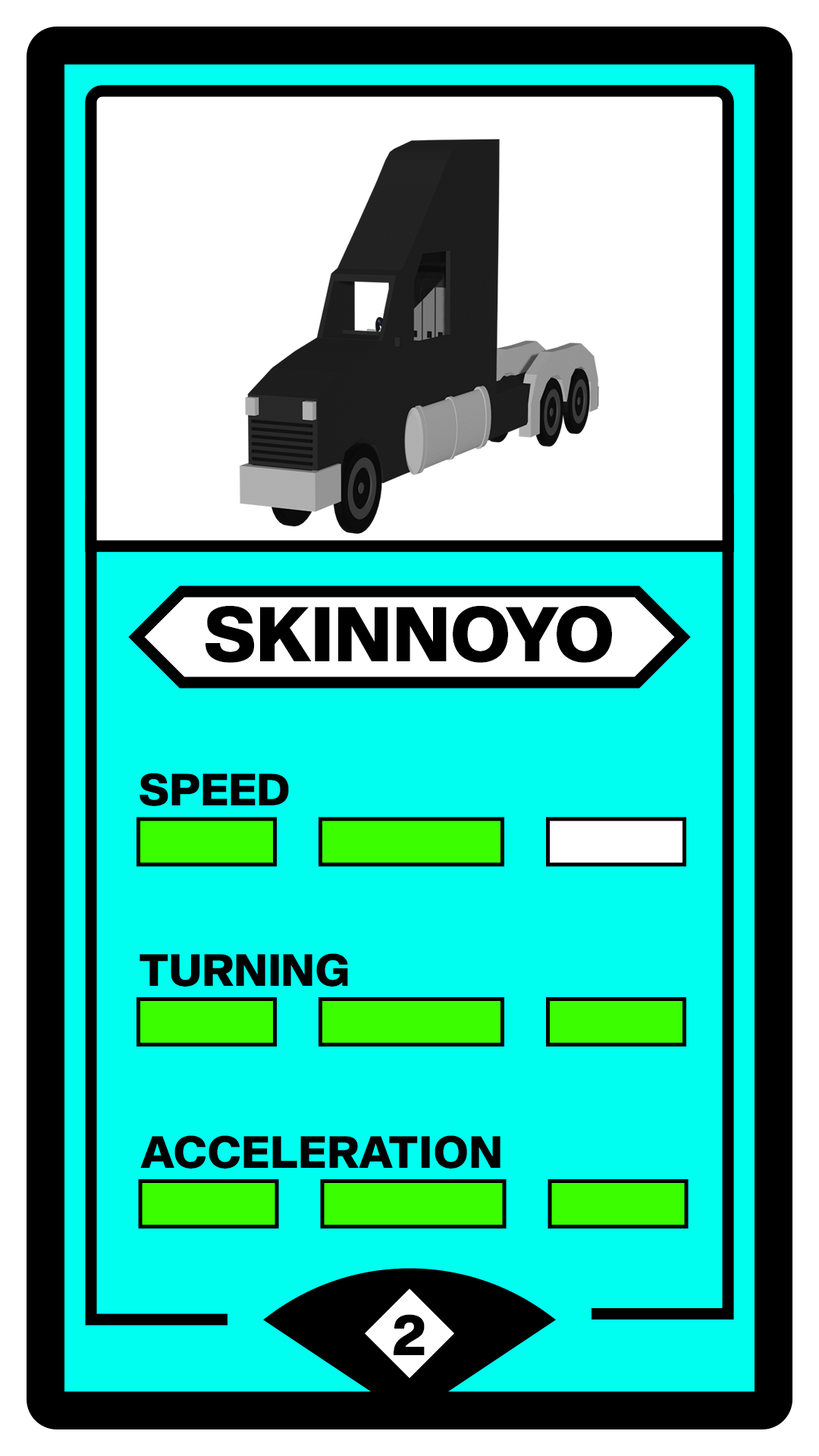
<style>
.page{position:relative;width:819px;height:1456px;background:#00fff0}
.page>*{position:absolute;margin:0}
.t1{font:75.8px "Shapiro-85SuperHeavy";letter-spacing:-0.01em;color:#000000}
.t2{font:44.2px "Shapiro-85SuperHeavy";letter-spacing:-0.01em;color:#000000}
.t3{font:44.2px "Shapiro-85SuperHeavy";letter-spacing:-0.01em;color:#000000;text-transform:uppercase}
.t4{font:56.9px "Shapiro-85SuperHeavy";letter-spacing:-0.01em;color:#000000}
</style>
<div class="page">
<p class="t1" style="left:206px;top:606px;width:406px;height:57px">SKINNOYO</p>
<p class="t2" style="left:140px;top:773px;width:149px;height:33px">SPEED</p>
<p class="t2" style="left:140px;top:953px;width:208px;height:34px">TURNING</p>
<p class="t3" style="left:140px;top:1135px;width:360px;height:34px">acceleration</p>
<p class="t4" style="left:394px;top:1314px;width:31px;height:41px">2</p>
</div>
